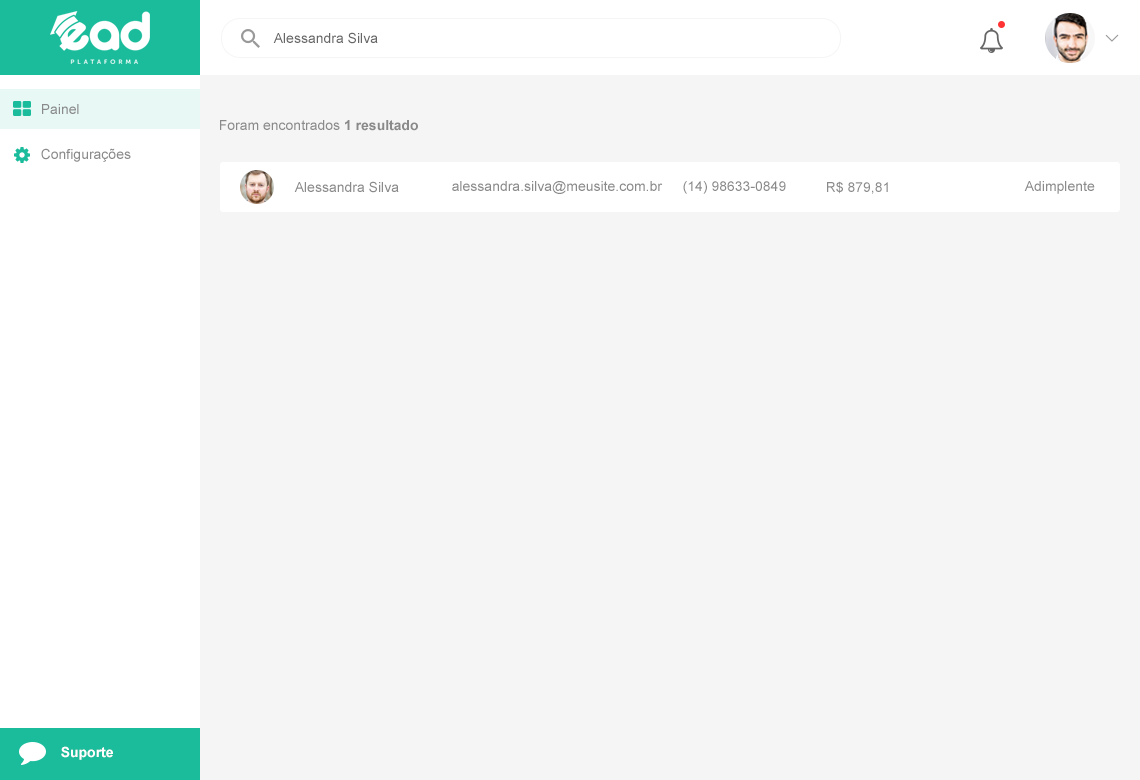
<style>
.page{position:relative;width:1140px;height:780px;background:#f5f5f5}
.page>*{position:absolute;margin:0}
.t1{font:14px "ArialMT";color:#666666}
.t2{font:14px "ArialMT";color:#8a8a8a}
.t3{font:14px "Arial-BoldMT";color:#8a8a8a}
.t4{font:14px "Arial-BoldMT";color:#ffffff}
</style>
<div class="page">
<p class="t1" style="left:273px;top:32px;width:105px;height:12px">Alessandra Silva</p>
<p class="t2" style="left:42px;top:104px;width:37px;height:10px">Painel</p>
<p class="t2" style="left:220px;top:120px;width:198px;height:11px">Foram encontrados <span class="t3">1 resultado</span></p>
<p class="t2" style="left:41px;top:148px;width:90px;height:14px">Configurações</p>
<p class="t2" style="left:294px;top:181px;width:105px;height:12px">Alessandra Silva</p>
<p class="t2" style="left:452px;top:181px;width:211px;height:13px">alessandra.silva@meusite.com.br</p>
<p class="t2" style="left:683px;top:181px;width:103px;height:13px">(14) 98633-0849</p>
<p class="t2" style="left:827px;top:181px;width:61px;height:13px">R$ 879,81</p>
<p class="t2" style="left:1024px;top:181px;width:71px;height:13px">Adimplente</p>
<p class="t4" style="left:61px;top:746px;width:52px;height:14px">Suporte</p>
</div>
